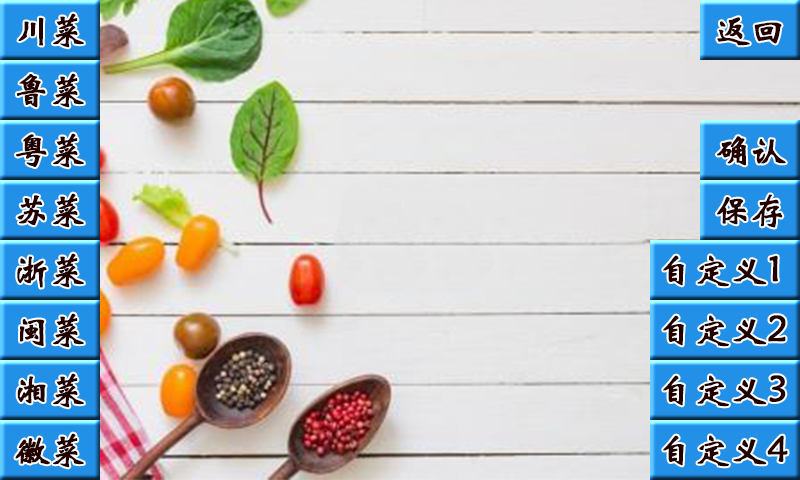
<style>
.page{position:relative;width:800px;height:480px}
.page>*{position:absolute;margin:0}
.t1{font:36px "STXinwei";letter-spacing:-0.005em;color:#220000;font-weight:bold}
</style>
<div class="page">
<p class="t1" style="left:18px;top:13px;width:66px;height:35px">川菜</p>
<p class="t1" style="left:717px;top:17px;width:65px;height:29px">返回</p>
<p class="t1" style="left:17px;top:73px;width:67px;height:35px">鲁菜</p>
<p class="t1" style="left:16px;top:133px;width:68px;height:35px">粤菜</p>
<p class="t1" style="left:717px;top:136px;width:69px;height:30px">确认</p>
<p class="t1" style="left:17px;top:193px;width:67px;height:35px">苏菜</p>
<p class="t1" style="left:717px;top:194px;width:66px;height:34px">保存</p>
<p class="t1" style="left:17px;top:253px;width:67px;height:35px">浙菜</p>
<p class="t1" style="left:663px;top:255px;width:115px;height:32px">自定义1</p>
<p class="t1" style="left:20px;top:313px;width:64px;height:35px">闽菜</p>
<p class="t1" style="left:663px;top:315px;width:123px;height:32px">自定义2</p>
<p class="t1" style="left:17px;top:373px;width:67px;height:35px">湘菜</p>
<p class="t1" style="left:663px;top:375px;width:123px;height:32px">自定义3</p>
<p class="t1" style="left:15px;top:433px;width:69px;height:35px">徽菜</p>
<p class="t1" style="left:663px;top:435px;width:125px;height:32px">自定义4</p>
</div>
